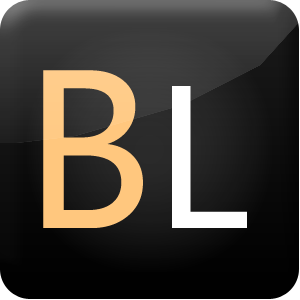
<style>
.page{position:relative;width:300px;height:300px}
.page>*{position:absolute;margin:0}
.t1{font:208.3px "MicrosoftYaHei";color:#ffc77e}
.t2{font:187.5px "MicrosoftYaHei";color:#ffffff}
</style>
<div class="page">
<p class="t1" style="left:43px;top:70px;width:204px;height:158px">B<span class="t2">L</span></p>
</div>
